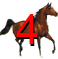
<style>
.page{position:relative;width:58px;height:59px;background:#ffffff}
.page>*{position:absolute;margin:0}
.t1{font:41.7px "ArialMT";color:#ff0101}
.t2{font:41.7px "ArialMT"}
</style>
<div class="page">
<p class="t1" style="left:16px;top:14px;width:22px;height:30px">4</p>
<p class="t2" style="left:17px;top:16px;width:22px;height:30px">4</p>
</div>
